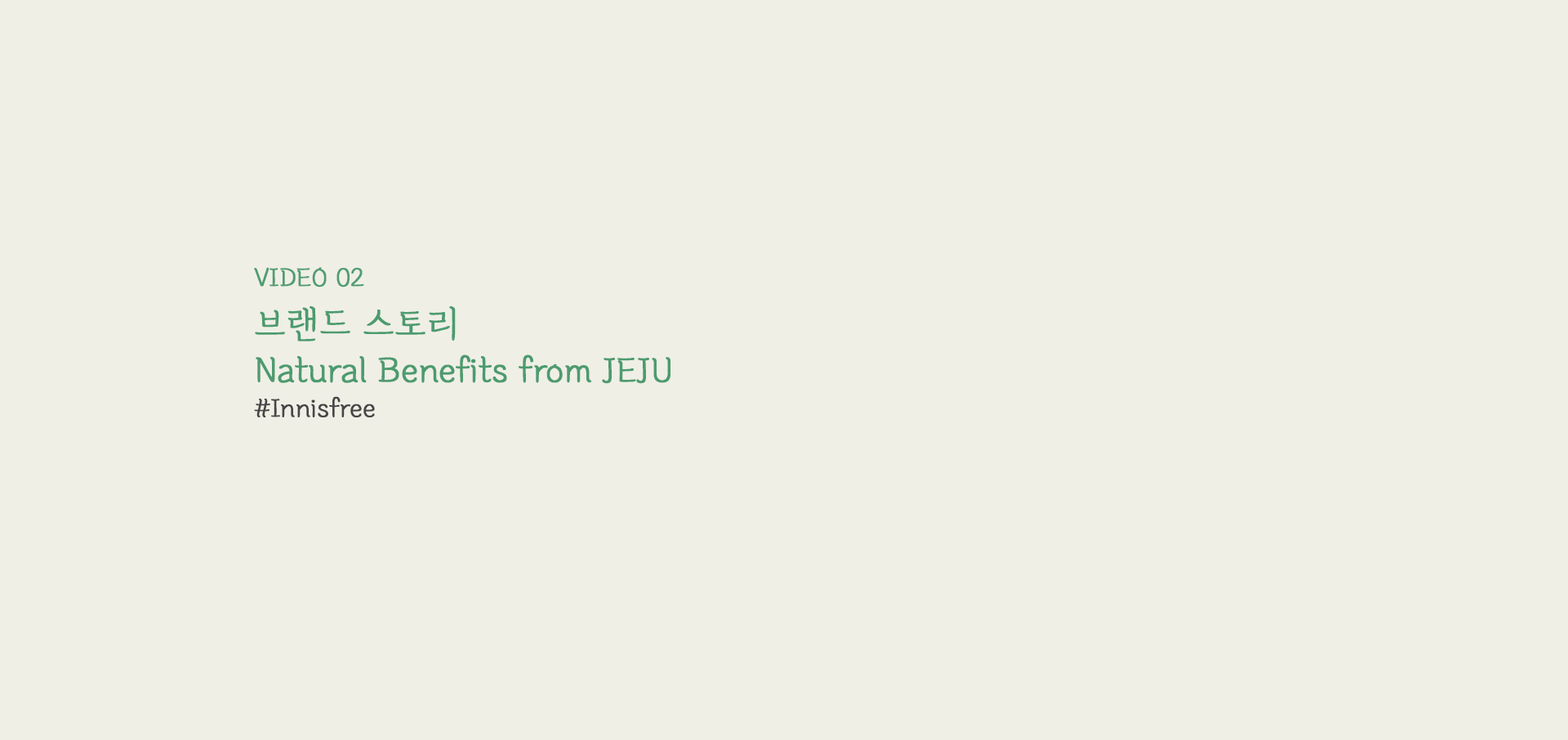
<style>
.page{position:relative;width:1568px;height:740px;background:#efefe6}
.page>*{position:absolute;margin:0}
.t1{font:29.4px "Cafe24Oneprettynight";color:#4e9d70;font-weight:bold}
.t2{font:39.2px "Cafe24Oneprettynight";color:#4c9b6e;font-weight:bold}
.t3{font:29.4px "Cafe24Oneprettynight";color:#474646;font-weight:bold}
</style>
<div class="page">
<p class="t1" style="left:254px;top:267px;width:110px;height:20px">VIDEO 02</p>
<p class="t2" style="left:255px;top:306px;width:415px;height:78px">브랜드 스토리┃<br>Natural Benefits from JEJU</p>
<p class="t3" style="left:254px;top:396px;width:121px;height:21px">#Innisfree</p>
</div>
